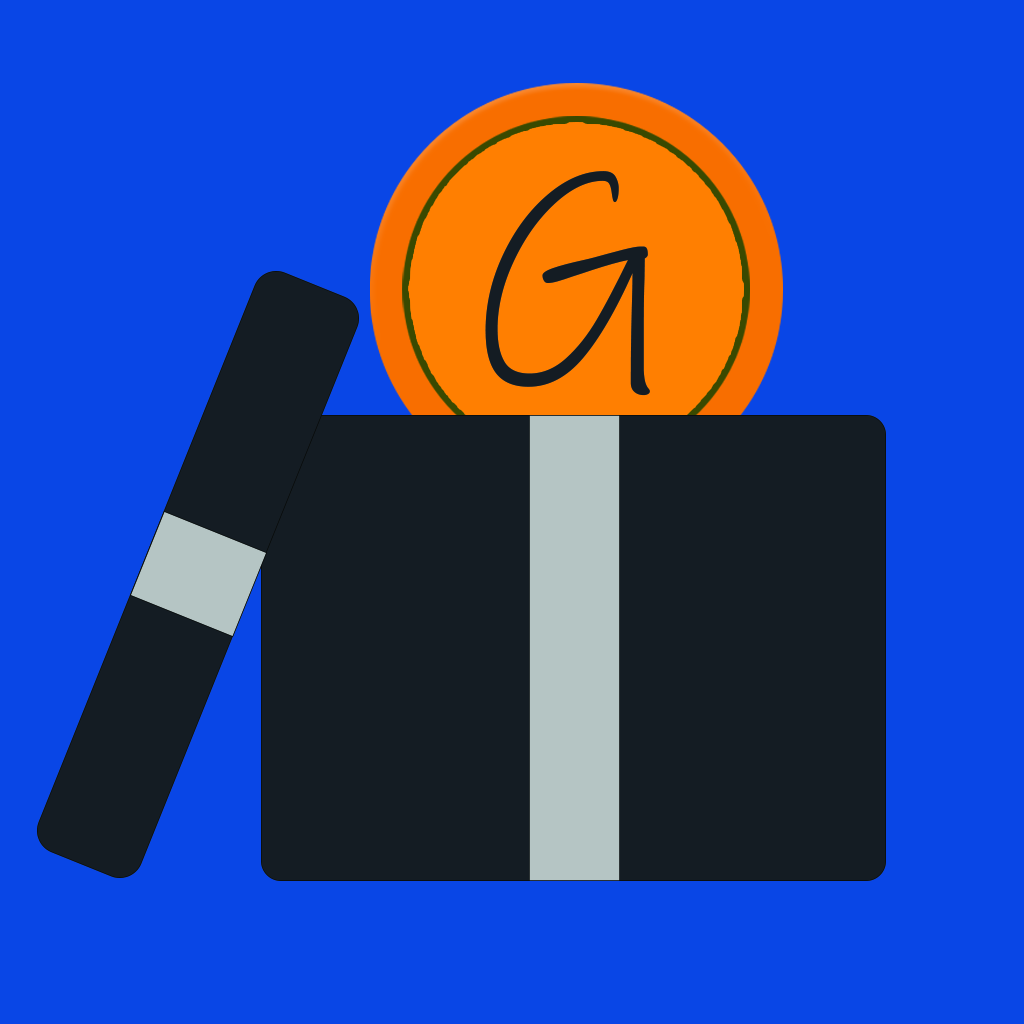
<style>
.page{position:relative;width:1024px;height:1024px;background:#0946e6}
.page>*{position:absolute;margin:0}
.t1{font:253.3px "InkFree";color:#141d23}
</style>
<div class="page">
<p class="t1" style="left:485px;top:171px;width:165px;height:225px">G</p>
</div>
